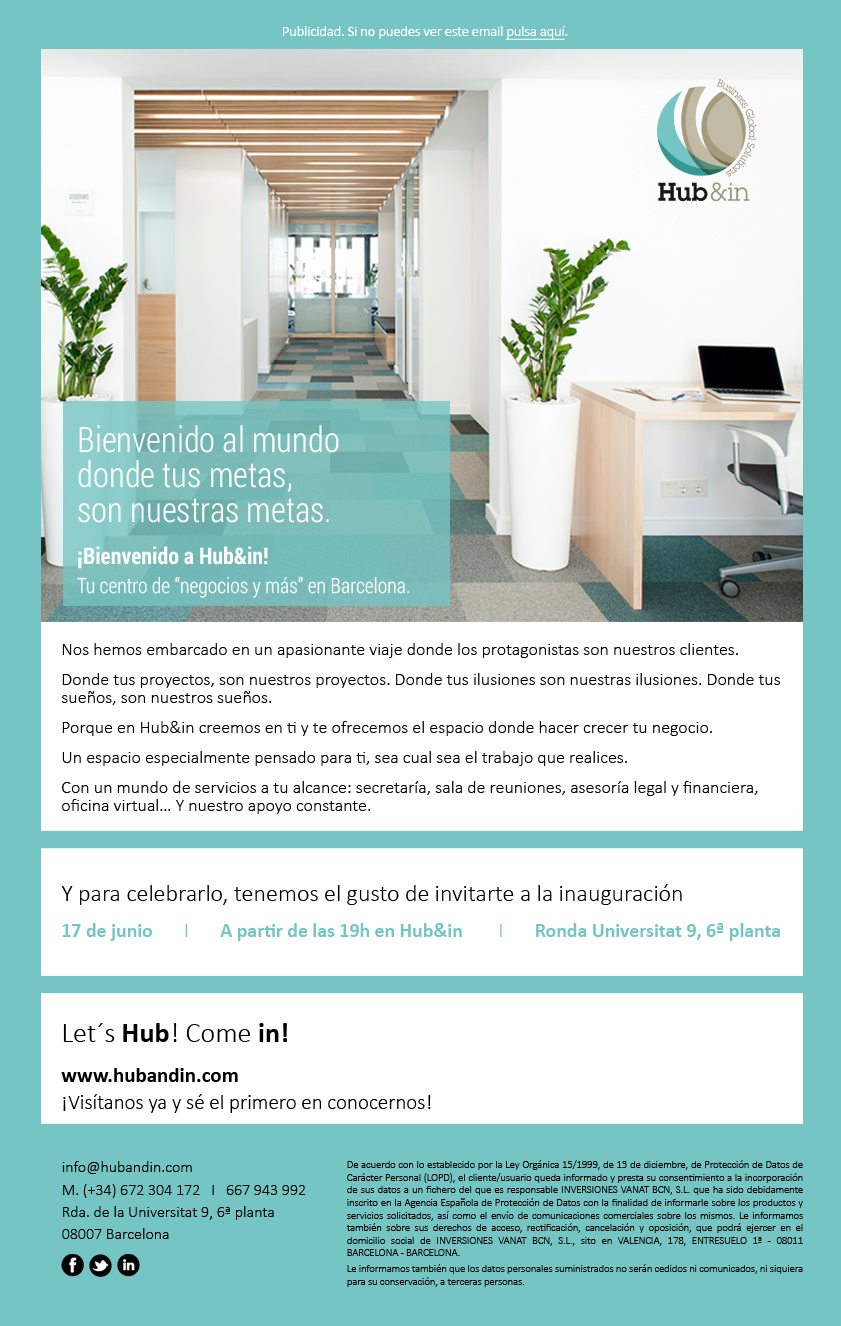
<style>
.page{position:relative;width:841px;height:1326px;background:#ffffff}
.page>*{position:absolute;margin:0}
.t1{font:15px "Calibri";letter-spacing:-0.025em;color:#ffffff}
.t2{font:15px "Calibri";letter-spacing:-0.025em;color:#ffffff;text-decoration:underline}
.t3{font:35px/35px "RobotoCondensed-Light";color:#ffffff}
.t4{font:23px/23px "RobotoCondensed-Bold";color:#ffffff}
.t5{font:21px/23px "RobotoCondensed-Light";color:#ffffff}
.t6{font:18px/18px "Calibri-Light";color:#000000}
.t7{font:24px/24px "Calibri-Light";color:#000000}
.t8{font:19.8px "Calibri-Bold";color:#74c5c3}
.t9{font:19.8px "Calibri-Light";color:#74c5c3}
.t10{font:21px/14px "Calibri-Light";color:#000000}
.t11{font:28.3px/29.3px "Calibri-Light";color:#000000}
.t12{font:28.3px/29.3px "Calibri-Bold";color:#000000}
.t13{font:21px/14px "Calibri-Bold";color:#000000}
.t14{font:16px "Calibri-Light";color:#000000}
.t15{font:10.5px "Calibri-Light";color:#000000}
</style>
<div class="page">
<p class="t1" style="left:283px;top:26px;width:285px;height:14px">Publicidad. Si no puedes ver este email <span class="t2">pulsa aquí</span>.</p>
<p class="t3" style="left:77px;top:425px;width:332px;height:173px">Bienvenido al mundo<br>donde tus metas,<br>son nuestras metas.<br><span class="t4">¡Bienvenido a Hub&amp;in!<br></span><span class="t5">Tu centro de “negocios y más” en Barcelona.</span></p>
<p class="t6" style="left:61px;top:643px;width:719px;height:171px">Nos hemos embarcado en un apasionante viaje donde los protagonistas son nuestros clientes.<br>Donde tus proyectos, son nuestros proyectos. Donde tus ilusiones son nuestras ilusiones. Donde tus sueños, son nuestros sueños.<br>Porque en Hub&amp;in creemos en ti y te ofrecemos el espacio donde hacer crecer tu negocio.<br>Un espacio especialmente pensado para ti, sea cual sea el trabajo que realices.<br>Con un mundo de servicios a tu alcance: secretaría, sala de reuniones, asesoría legal y financiera, oficina virtual… Y nuestro apoyo constante.</p>
<p class="t7" style="left:62px;top:884px;width:718px;height:57px">Y para celebrarlo, tenemos el gusto de invitarte a la inauguración<br><span class="t8">17 de junio</span><span class="t9">       I       </span><span class="t8">A partir de las 19h en Hub&amp;in  </span><span class="t9">      I       </span><span class="t8">Ronda Universitat 9, 6ª planta</span></p>
<p class="t10" style="left:61px;top:1023px;width:370px;height:90px"><span class="t11">Let´s</span><span class="t12"> Hub</span><span class="t11">! Come </span><span class="t12">in!<br></span><span class="t13">www.hubandin.com<br></span>¡Visítanos ya y sé el primero en conocernos!</p>
<p class="t14" style="left:62px;top:1161px;width:244px;height:78px">info@hubandin.com<br>M. (+34) 672 304 172   I   667 943 992<br>Rda. de la Universitat 9, 6ª planta<br>08007 Barcelona</p>
<p class="t15" style="left:346px;top:1160px;width:457px;height:127px;text-align:justify">De acuerdo con lo establecido por la Ley Orgánica 15/1999, de 13 de diciembre, de Protección de Datos de Carácter Personal (LOPD), el cliente/usuario queda informado y presta su consentimiento a la incorporación de sus datos a un fichero del que es responsable INVERSIONES VANAT BCN, S.L. que ha sido debidamente inscrito en la Agencia Española de Protección de Datos con la finalidad de informarle sobre los productos y servicios solicitados, así como el envío de comunicaciones comerciales sobre los mismos. Le informamos también sobre sus derechos de acceso, rectificación, cancelación y oposición, que podrá ejercer en el domicilio social de INVERSIONES VANAT BCN, S.L., sito en VALENCIA, 178, ENTRESUELO 1ª - 08011 BARCELONA - BARCELONA.<br>Le informamos también que los datos personales suministrados no serán cedidos ni comunicados, ni siquiera para su conservación, a terceras personas.</p>
</div>
